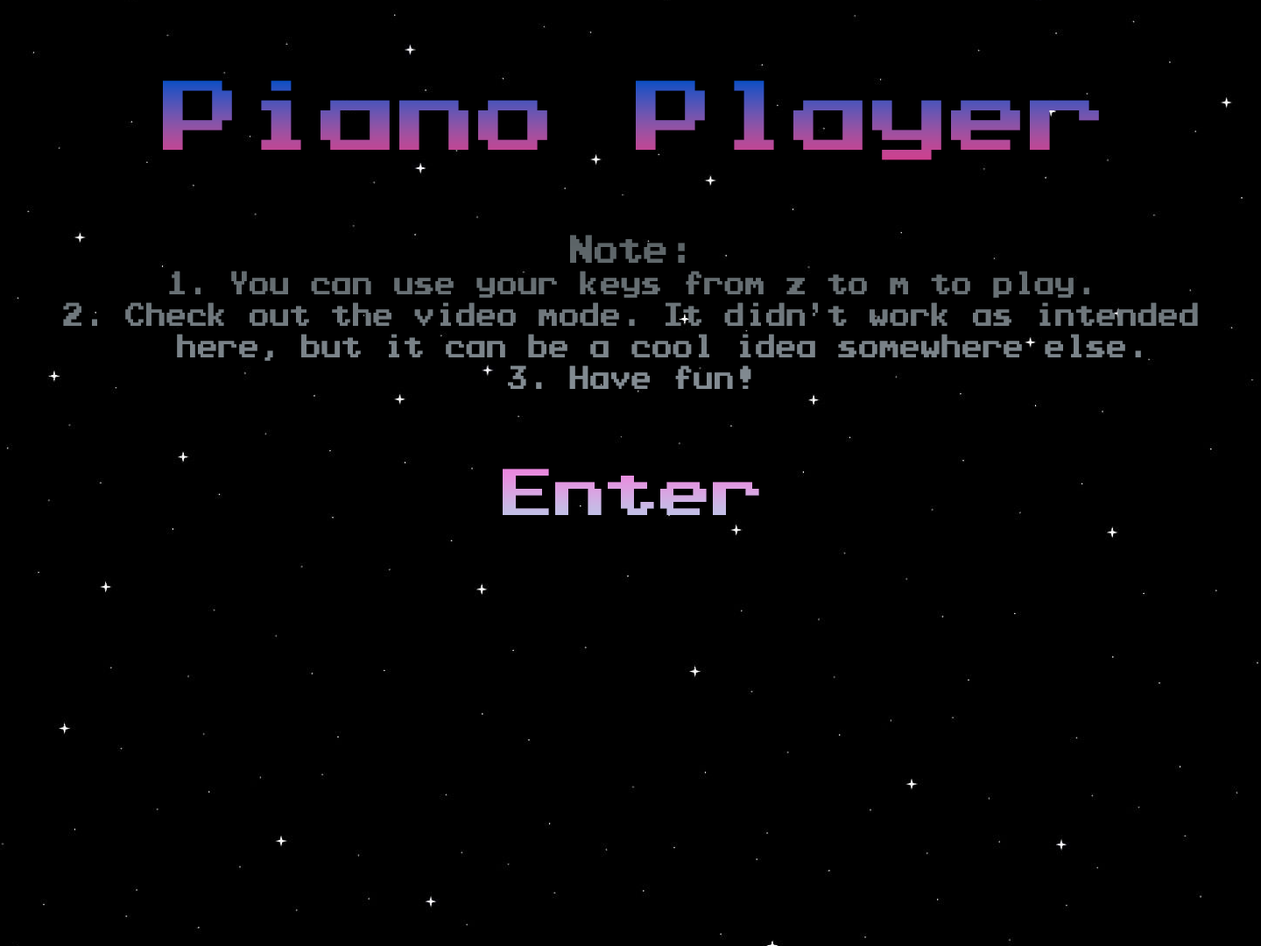
<style>
.page{position:relative;width:1261px;height:946px;background:#000000}
.page>*{position:absolute;margin:0}
.t1{font:78.8px "PressStartK"}
.t2{font:26.3px "PressStartK";color:#70797e;scale:0.79 1}
.t3{font:31.5px "PressStartK";color:#70797e;scale:0.79 1}
.t4{font:52.5px "PressStartK";color:#d6a8e2}
</style>
<div class="page">
<p class="t1" style="left:163px;top:81px;width:936px;height:79px">Piano Player</p>
<p class="t2" style="left:63px;top:235px;width:1135px;height:154px;text-align:center"><span class="t3">Note:<br></span>1. You can use your keys from z to m to play.<br>2. Check out the video mode. It didn’t work as intended<br>   here, but it can be a cool idea somewhere else.<br>3. Have fun!</p>
<p class="t4" style="left:503px;top:468px;width:256px;height:47px">Enter</p>
</div>
